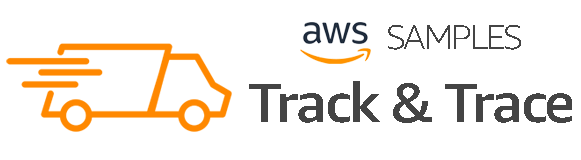
<style>
.page{position:relative;width:581px;height:160px;background:#ffffff}
.page>*{position:absolute;margin:0}
.t1{font:34.5px "AmazonEmber-Light";letter-spacing:-0.06em;color:#444444;scale:1.04 1}
.t2{font:55.2px "AmazonEmber-Medium";letter-spacing:-0.04em;color:#444444;scale:1.04 1}
</style>
<div class="page">
<p class="t1" style="left:388px;top:25px;width:133px;height:25px">SAMPLES</p>
<p class="t2" style="left:249px;top:81px;width:323px;height:42px">Track &amp; Trace</p>
</div>
